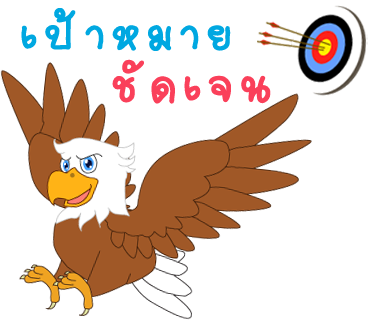
<style>
.page{position:relative;width:370px;height:320px;background:#ffffff}
.page>*{position:absolute;margin:0}
.t1{font:70px "2005_iannnnnMTV";letter-spacing:0.075em;color:#00a8e1;scale:1.06 1}
.t2{font:74px "2005_iannnnnMTV";letter-spacing:0.075em;color:#fa405a;scale:1.06 1}
</style>
<div class="page">
<p class="t1" style="left:21px;top:8px;width:210px;height:43px">เป้าหมาย</p>
<p class="t2" style="left:112px;top:59px;width:159px;height:45px">ชัดเจน</p>
</div>
